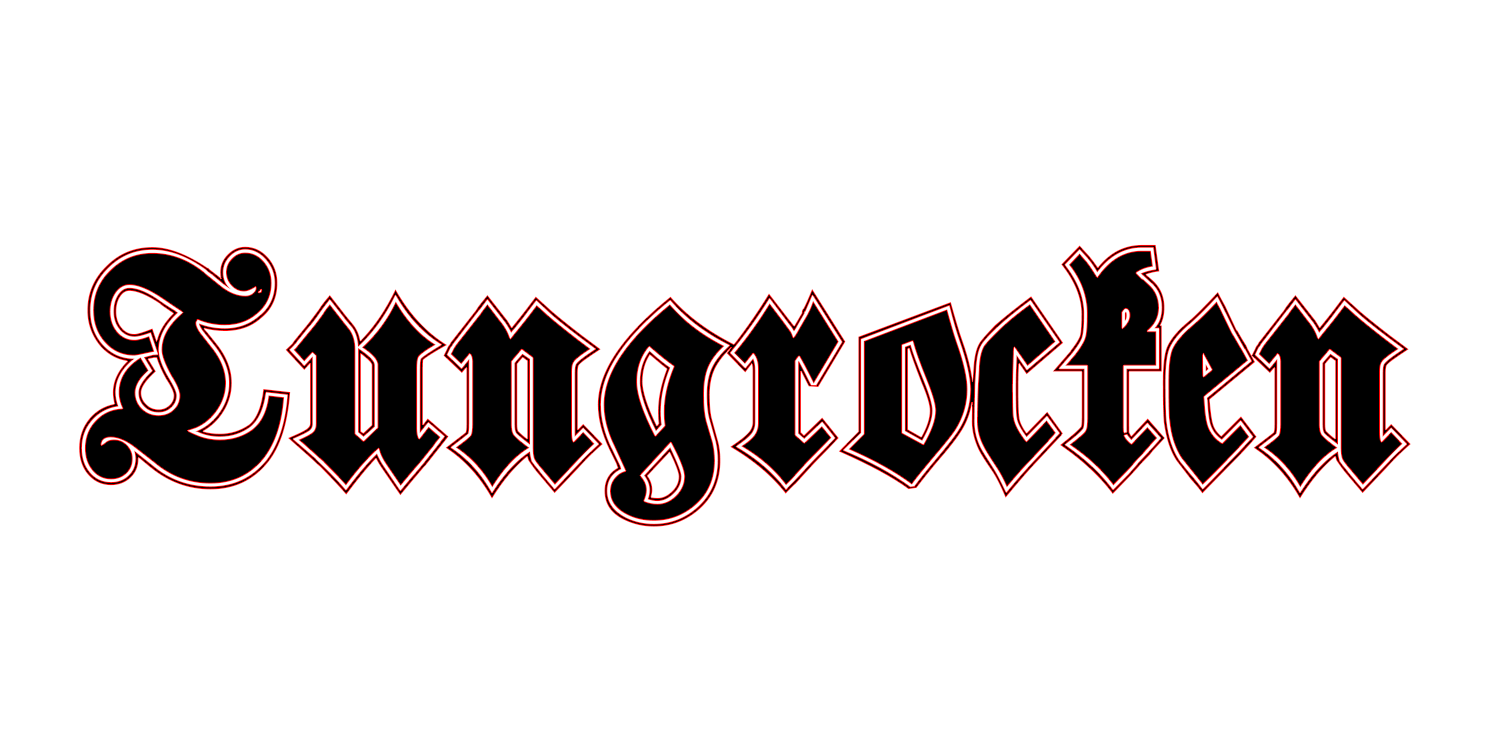
<style>
.page{position:relative;width:1500px;height:750px;background:#ffffff}
.page>*{position:absolute;margin:0}
.t1{font:303.7px "Walbaum-Fraktur-Inline-Bold";color:#000000}
</style>
<div class="page">
<p class="t1" style="left:79px;top:244px;width:1332px;height:283px">Tungrocken</p>
</div>
